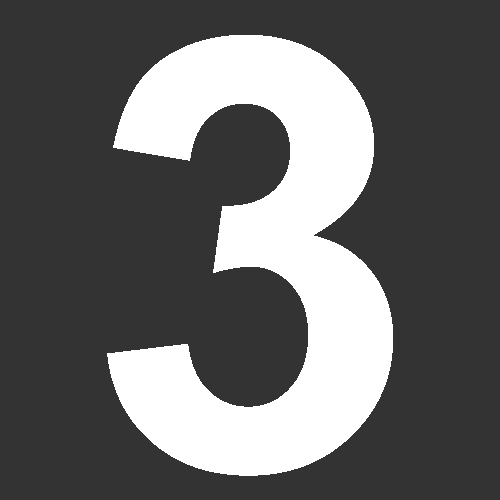
<style>
.page{position:relative;width:500px;height:500px;background:#333333}
.page>*{position:absolute;margin:0}
.t1{font:600px "Arial-BoldMT";color:#ffffff}
</style>
<div class="page">
<p class="t1" style="left:107px;top:35px;width:286px;height:441px">3</p>
</div>
